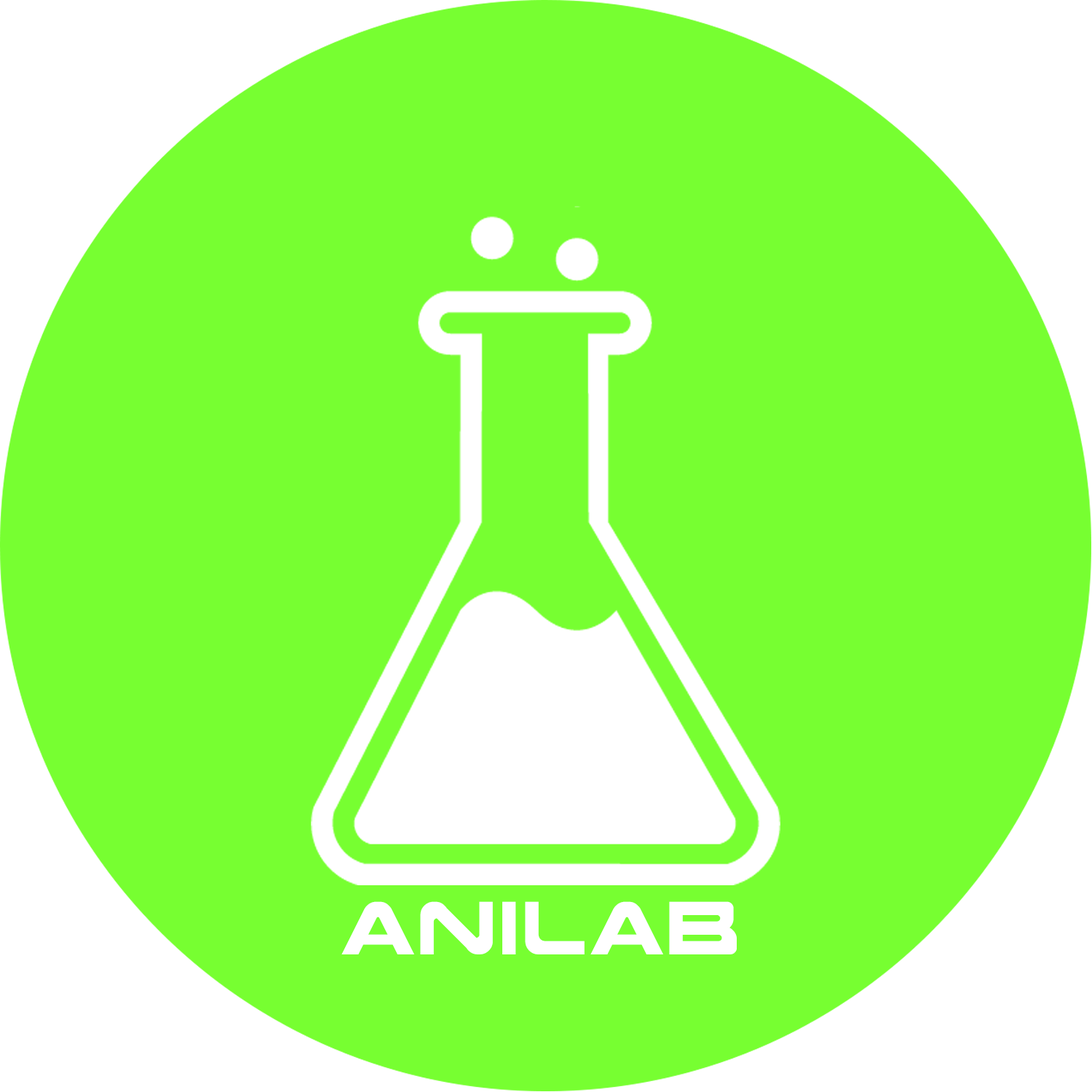
<style>
.page{position:relative;width:1092px;height:1092px;background:#77ff31}
.page>*{position:absolute;margin:0}
.t1{font:52.4px "Future-Earth";color:#ffffff}
</style>
<div class="page">
<p class="t1" style="left:341px;top:901px;width:396px;height:53px">AniLab</p>
</div>
